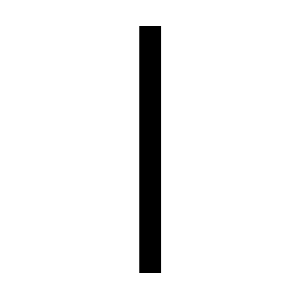
<style>
.page{position:relative;width:300px;height:300px;background:#ffffff}
.page>*{position:absolute;margin:0}
.t1{font:246.9px "MyanmarText";color:#000000;scale:1.22 1}
</style>
<div class="page">
<p class="t1" style="left:139px;top:26px;width:23px;height:247px">|</p>
</div>
